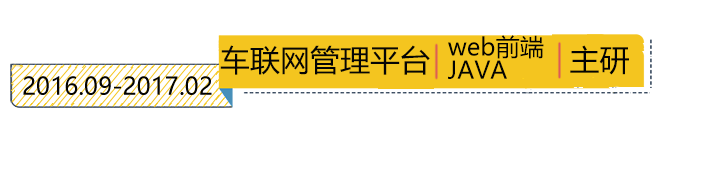
<style>
.page{position:relative;width:709px;height:170px;background:#ffffff}
.page>*{position:absolute;margin:0}
.t1{font:24px "MicrosoftYaHei";color:#030303}
.t2{font:30px "MicrosoftYaHei";color:#050505}
.t3{font:30px "MicrosoftYaHei";color:#030303}
</style>
<div class="page">
<p class="t1" style="left:448px;top:35px;width:96px;height:24px">web前端</p>
<p class="t2" style="left:220px;top:45px;width:210px;height:30px">车联网管理平台</p>
<p class="t3" style="left:570px;top:45px;width:59px;height:30px">主研</p>
<p class="t1" style="left:448px;top:60px;width:59px;height:19px">JAVA</p>
<p class="t1" style="left:23px;top:76px;width:189px;height:19px">2016.09-2017.02</p>
</div>
